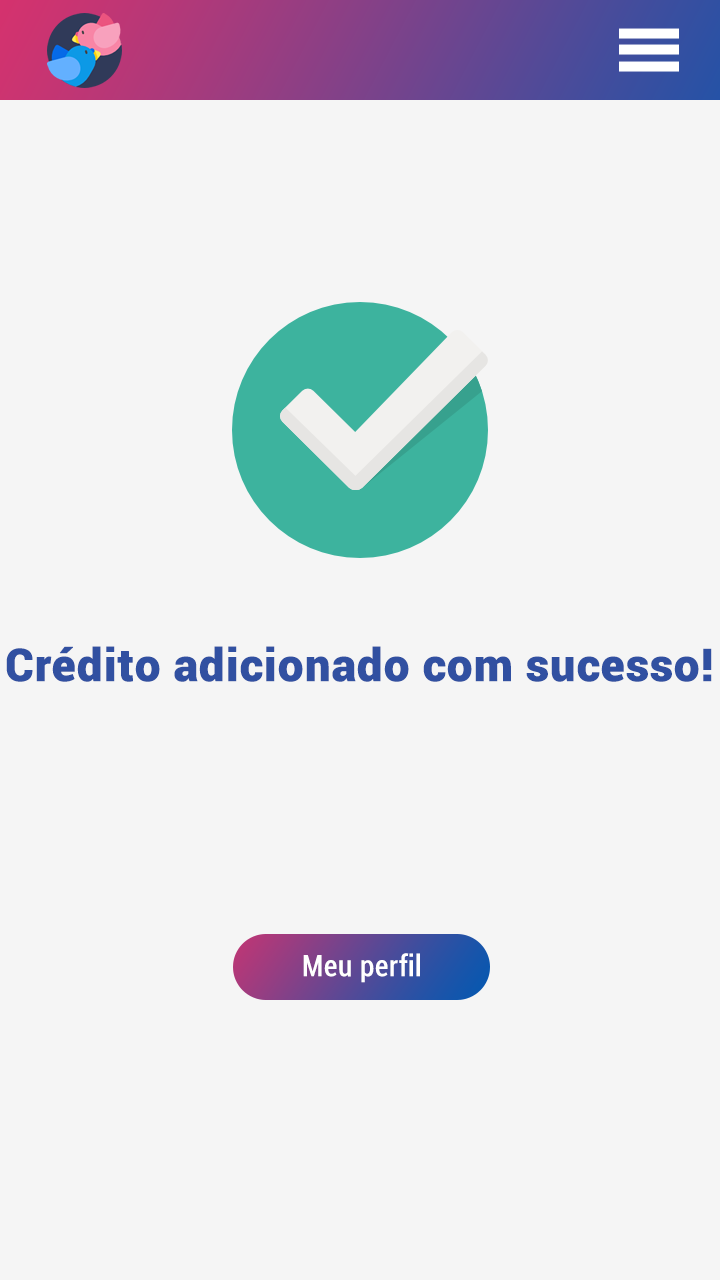
<style>
.page{position:relative;width:720px;height:1280px;background:#f5f5f5}
.page>*{position:absolute;margin:0}
.t1{font:45px "Roboto-Black";color:#3150a1;font-weight:bold}
.t2{font:29px "Roboto-Condensed";color:#ffffff;font-weight:bold}
</style>
<div class="page">
<p class="t1" style="left:6px;top:646px;width:706px;height:36px">Crédito adicionado com sucesso!</p>
<p class="t2" style="left:303px;top:953px;width:117px;height:30px">Meu perfil</p>
</div>
